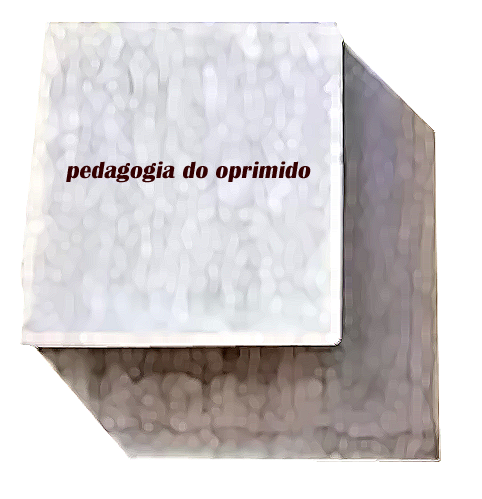
<style>
.page{position:relative;width:482px;height:499px;background:#ffffff}
.page>*{position:absolute;margin:0}
.t1{font:24.3px "BritannicBold";color:#330000}
</style>
<div class="page">
<p class="t1" style="left:66px;top:161px;width:245px;height:22px">pedagogia do oprimido</p>
</div>
